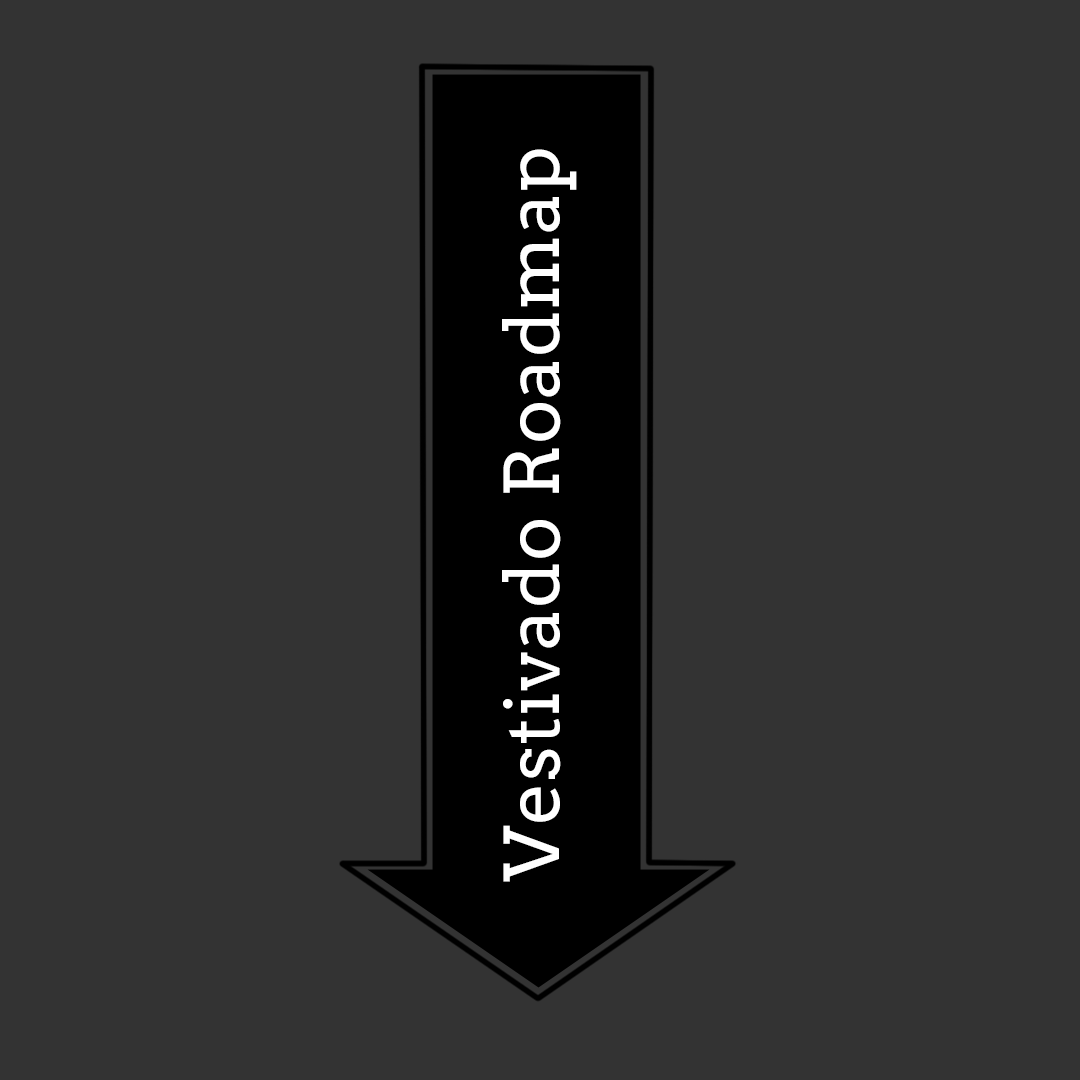
<style>
.page{position:relative;width:1080px;height:1080px;background:#333333}
.page>*{position:absolute;margin:0}
.t1{font:75px "Arvo";letter-spacing:0.01em;color:#ffffff}
</style>
<div class="page">
<p class="t1" style="left:502px;top:149px;width:75px;height:733px;rotate:-90deg">Vestivado Roadmap</p>
</div>
